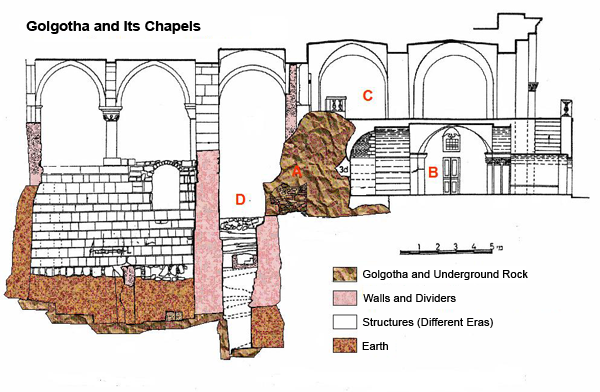
<style>
.page{position:relative;width:600px;height:392px;background:#fefefe}
.page>*{position:absolute;margin:0}
.t1{font:14.5px "Arial-BoldMT";color:#000000}
.t2{font:11.3px "ArialMT";color:#000000}
</style>
<div class="page">
<p class="t1" style="left:26px;top:21px;width:175px;height:13px">Golgotha and Its Chapels</p>
<p class="t2" style="left:363px;top:270px;width:165px;height:10px">Golgotha and Underground Rock</p>
<p class="t2" style="left:363px;top:294px;width:93px;height:8px">Walls and Dividers</p>
<p class="t2" style="left:362px;top:318px;width:131px;height:10px">Structures (Different Eras)</p>
<p class="t2" style="left:362px;top:342px;width:26px;height:8px">Earth</p>
</div>
